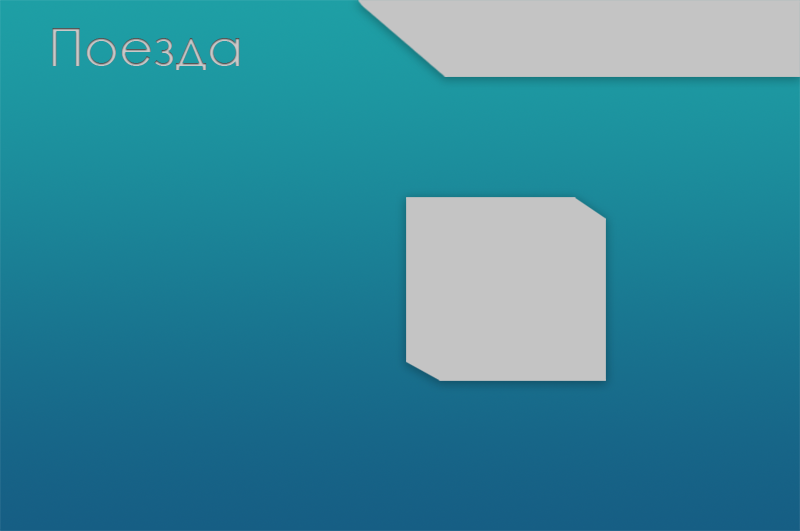
<style>
.page{position:relative;width:800px;height:531px}
.page>*{position:absolute;margin:0}
.t1{font:53.5px "CenturyGothic";color:#b4b4b4}
</style>
<div class="page">
<p class="t1" style="left:52px;top:28px;width:188px;height:42px">Поезда</p>
</div>
